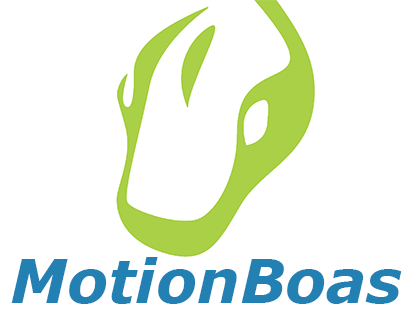
<style>
.page{position:relative;width:412px;height:320px;background:#ffffff}
.page>*{position:absolute;margin:0}
.t1{font:60px "Verdana-BoldItalic";color:#2280b3}
</style>
<div class="page">
<p class="t1" style="left:11px;top:257px;width:391px;height:47px">MotionBoas</p>
</div>
